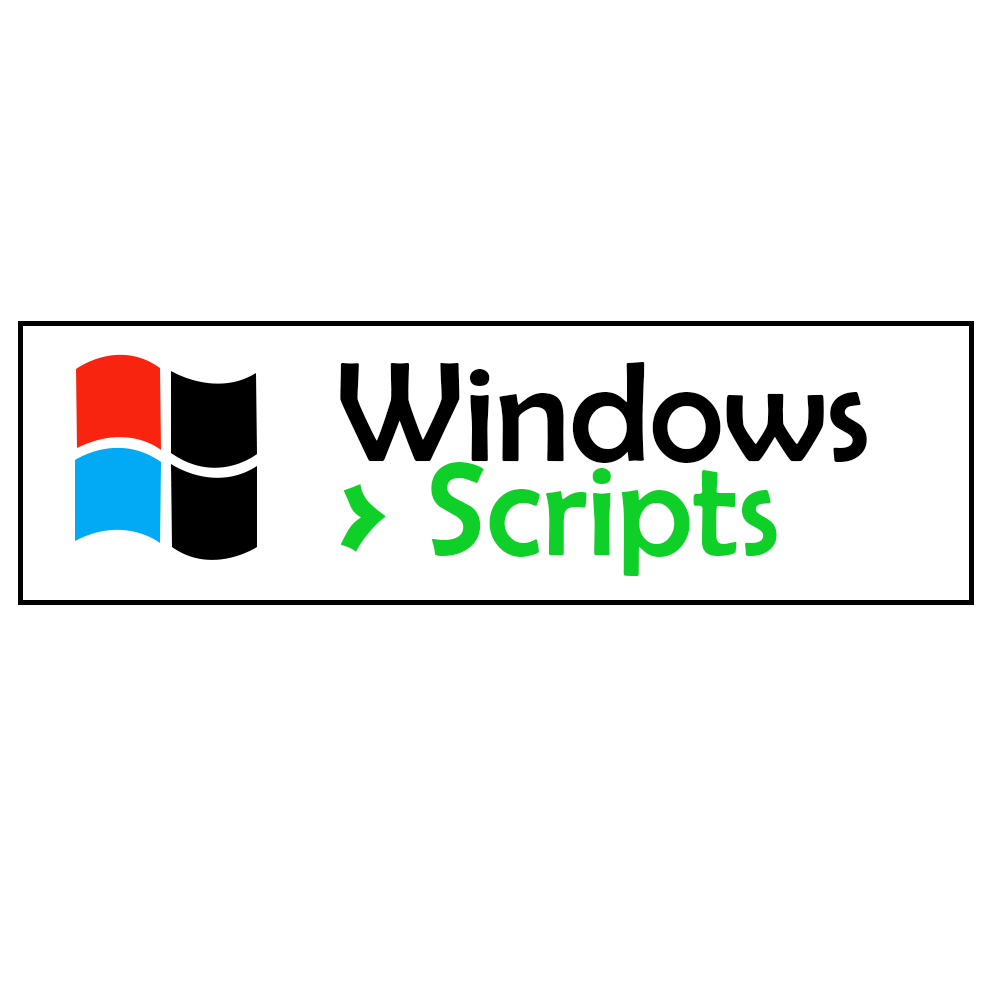
<style>
.page{position:relative;width:1000px;height:1000px;background:#ffffff}
.page>*{position:absolute;margin:0}
.t1{font:143.1px "BerlinSansFB-Reg";color:#000000}
.t2{font:135.2px "BerlinSansFB-Reg";color:#0ed029}
.t3{font:119.3px "Ravie";color:#0ed029}
</style>
<div class="page">
<p class="t1" style="left:340px;top:362px;width:527px;height:101px">Windows</p>
<p class="t2" style="left:431px;top:462px;width:346px;height:114px">Scripts</p>
<p class="t3" style="left:340px;top:484px;width:46px;height:68px">&gt;</p>
</div>
